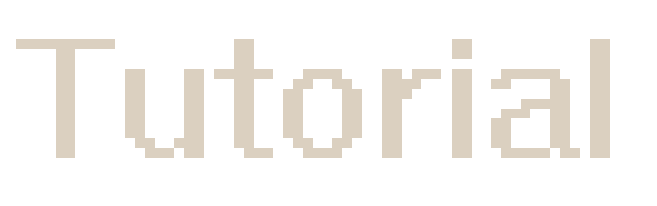
<style>
.page{position:relative;width:657px;height:206px;background:#ffffff}
.page>*{position:absolute;margin:0}
.t1{font:158.3px "System";color:#dbd0c0}
</style>
<div class="page">
<p class="t1" style="left:16px;top:39px;width:594px;height:119px">Tutorial</p>
</div>
